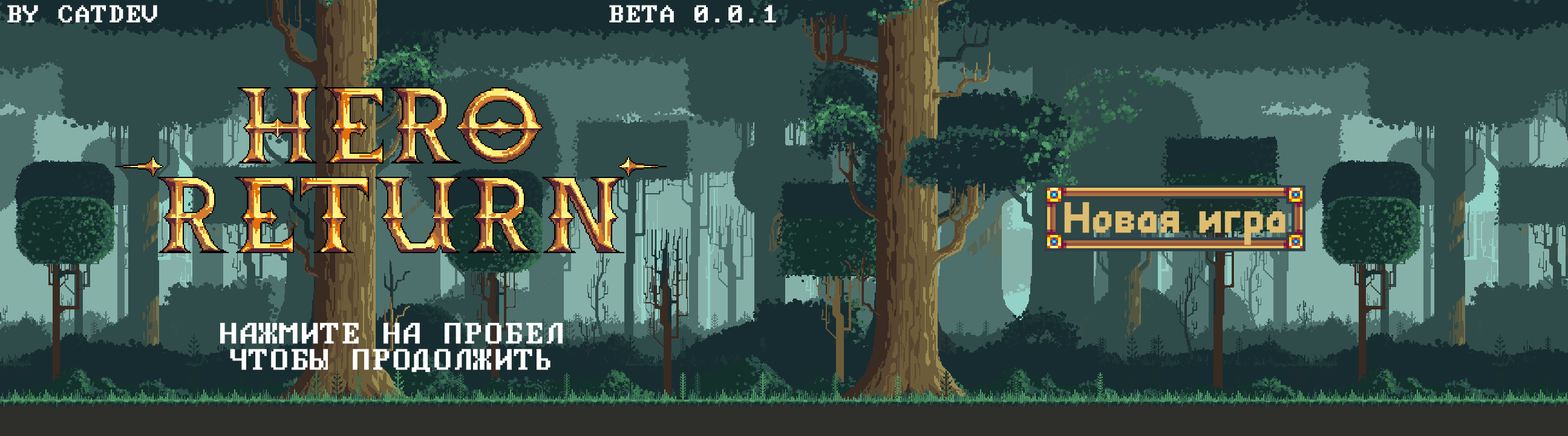
<style>
.page{position:relative;width:1568px;height:436px;background:#2f4c4a}
.page>*{position:absolute;margin:0}
.t1{font:30.2px "PxPlusIBMMDA";color:#ffffff;text-transform:uppercase}
.t2{font:36.4px/8.7px "PxPlusIBMMDA";color:#ffffff;text-transform:uppercase}
</style>
<div class="page">
<p class="t1" style="left:7px;top:5px;width:150px;height:17px">By CatDev</p>
<p class="t1" style="left:609px;top:5px;width:167px;height:17px">BetA 0.0.1</p>
<p class="t2" style="left:220px;top:322px;width:343px;height:50px;text-align:center">Нажмите на пробел<br><br><br>Чтобы продолжить</p>
</div>
